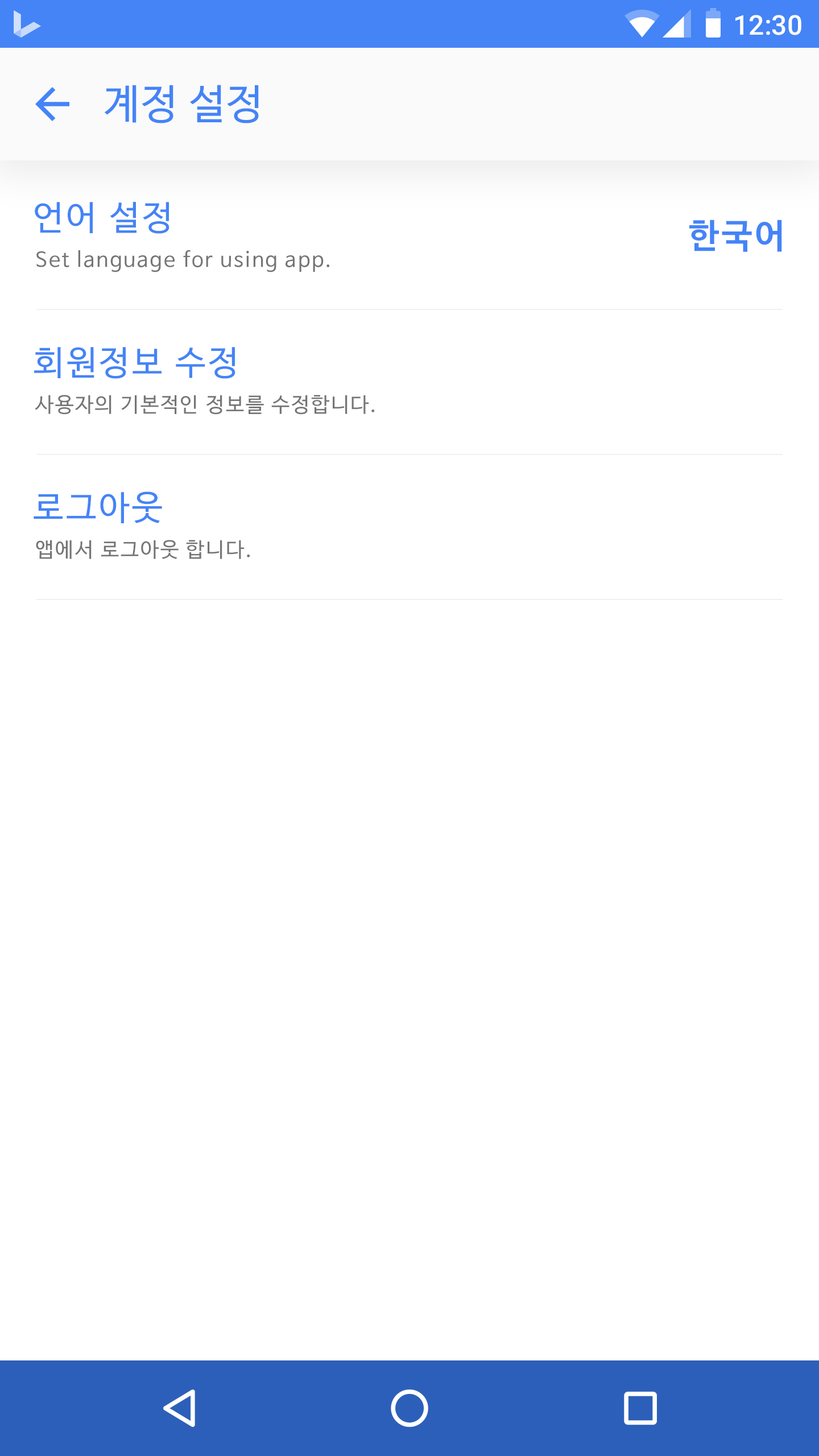
<style>
.page{position:relative;width:819px;height:1456px;background:#ffffff}
.page>*{position:absolute;margin:0}
.t1{font:27.3px "Roboto-Medium";color:#ffffff}
.t2{font:40.9px "NanumBarunGothic";letter-spacing:0.025em;color:#4484f6}
.t3{font:34.1px "NanumBarunGothic";letter-spacing:0.075em;color:#4484f6}
.t4{font:34.1px "NanumBarunGothicBold";letter-spacing:0.075em;color:#4484f6}
.t5{font:20.5px "NanumBarunGothic";letter-spacing:0.075em;color:#757575}
</style>
<div class="page">
<p class="t1" style="left:735px;top:15px;width:66px;height:20px">12:30</p>
<p class="t2" style="left:104px;top:85px;width:155px;height:38px">계정 설정</p>
<p class="t3" style="left:35px;top:202px;width:134px;height:32px">언어 설정</p>
<p class="t4" style="left:689px;top:220px;width:93px;height:32px">한국어</p>
<p class="t5" style="left:36px;top:250px;width:294px;height:22px">Set language for using app.</p>
<p class="t3" style="left:34px;top:347px;width:201px;height:32px">회원정보 수정</p>
<p class="t5" style="left:35px;top:395px;width:340px;height:20px">사용자의 기본적인 정보를 수정합니다.</p>
<p class="t3" style="left:34px;top:491px;width:128px;height:32px">로그아웃</p>
<p class="t5" style="left:36px;top:540px;width:214px;height:19px">앱에서 로그아웃 합니다.</p>
</div>
